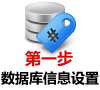
<style>
.page{position:relative;width:100px;height:90px;background:#ffffff}
.page>*{position:absolute;margin:0}
.t1{font:16px "MicrosoftYaHei";color:#d70707}
.t2{font:14px "MicrosoftYaHei";color:#000000}
</style>
<div class="page">
<p class="t1" style="left:25px;top:50px;width:48px;height:17px">第一步</p>
<p class="t2" style="left:1px;top:71px;width:98px;height:14px">数据库信息设置</p>
</div>
